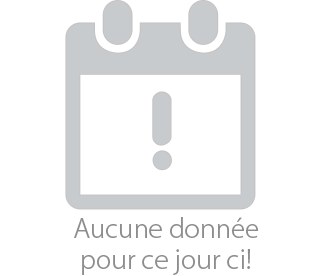
<style>
.page{position:relative;width:328px;height:276px;background:#ffffff}
.page>*{position:absolute;margin:0}
.t1{font:26px "KozGoPr6N-Light";color:#8d8d8d}
</style>
<div class="page">
<p class="t1" style="left:74px;top:217px;width:184px;height:58px;text-align:center">Aucune donnée<br>pour ce jour ci!</p>
</div>
